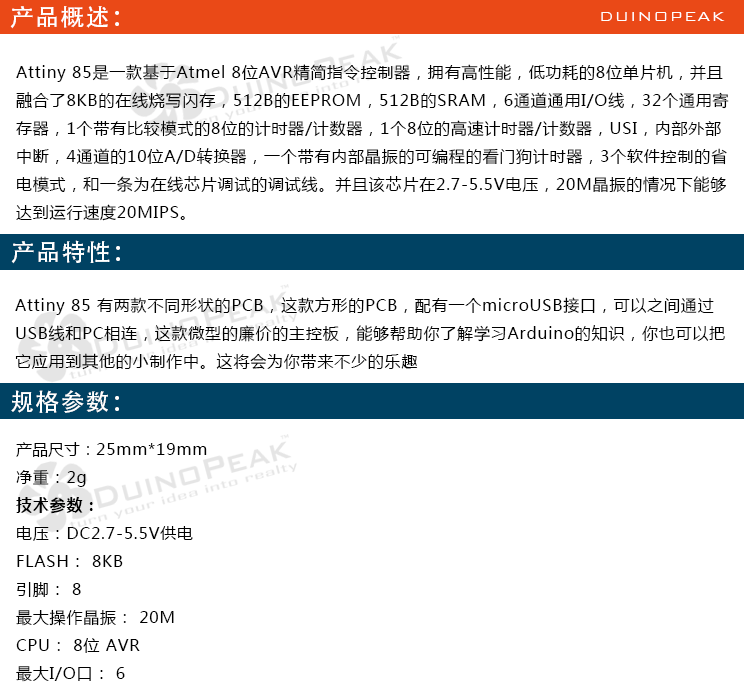
<style>
.page{position:relative;width:744px;height:699px;background:#ffffff}
.page>*{position:absolute;margin:0}
.t1{font:24px "AdobeHeitiStd-Regular";letter-spacing:0.05em;color:#ffffff}
.t2{font:18px "BankGothicBT-Light";letter-spacing:0.05em;color:#ffffff}
.t3{font:16px "MicrosoftYaHei";letter-spacing:0.05em;color:#000000}
.t4{font:16px "MicrosoftYaHei";color:#000000}
.t5{font:16px "MicrosoftYaHei-Bold";letter-spacing:0.05em;color:#000000}
</style>
<div class="page">
<p class="t1" style="left:10px;top:6px;width:109px;height:23px">产品概述：</p>
<p class="t2" style="left:601px;top:12px;width:124px;height:9px">DUINOPEAK</p>
<p class="t3" style="left:16px;top:64px;width:713px;height:157px">Attiny 85是一款基于Atmel 8位AVR精简指令控制器，拥有高性能，低功耗的8位单片机，并且<br>融合了8KB的在线烧写闪存，512B的EEPROM，512B的SRAM，6通道通用I/O线，32个通用寄<br>存器，1个带有比较模式的8位的计时器/计数器，1个8位的高速计时器/计数器，USI，内部外部<br>中断，4通道的10位A/D转换器，一个带有内部晶振的可编程的看门狗计时器，3个软件控制的省<br>电模式，和一条为在线芯片调试的调试线。并且该芯片在2.7-5.5V电压，20M晶振的情况下能够<br>达到运行速度20MIPS。</p>
<p class="t1" style="left:11px;top:240px;width:109px;height:24px">产品特性：</p>
<p class="t3" style="left:15px;top:297px;width:710px;height:73px">Attiny 85 有两款不同形状的PCB，这款方形的PCB，配有一个microUSB接口，可以之间通过<br>USB线和PC相连，这款微型的廉价的主控板，能够帮助你了解学习Arduino的知识，你也可以把<br>它应用到其他的小制作中。这将会为你带来不少的乐趣</p>
<p class="t1" style="left:11px;top:390px;width:108px;height:23px">规格参数：</p>
<p class="t3" style="left:16px;top:442px;width:191px;height:240px"><span class="t4">产品尺寸：</span>25mm*19mm<br>净重：2g<br><span class="t5">技术参数：<br></span>电压：DC2.7-5.5V供电<br>FLASH： 8KB<br>引脚： 8<br>最大操作晶振： 20M<br>CPU： 8位 AVR<br>最大I/O口： 6</p>
</div>
